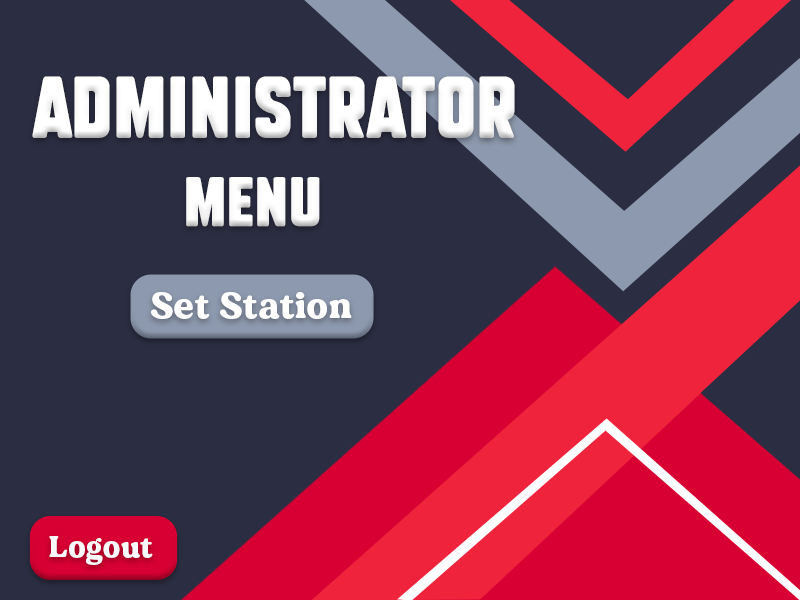
<style>
.page{position:relative;width:800px;height:600px;background:#2b2d42}
.page>*{position:absolute;margin:0}
.t1{font:60px "SubtleCurves";letter-spacing:0.025em;color:#ffffff}
.t2{font:48px "SubtleCurves";letter-spacing:0.025em;color:#ffffff}
.t3{font:36px "MADEDillan";letter-spacing:0.025em;color:#ffffff}
.t4{font:30px "MADEDillan";letter-spacing:0.025em;color:#f9f9f9}
</style>
<div class="page">
<p class="t1" style="left:32px;top:76px;width:483px;height:62px">Administrator</p>
<p class="t2" style="left:186px;top:177px;width:134px;height:50px">Menu</p>
<p class="t3" style="left:151px;top:292px;width:201px;height:27px">Set Station</p>
<p class="t4" style="left:49px;top:536px;width:104px;height:29px">Logout</p>
</div>
